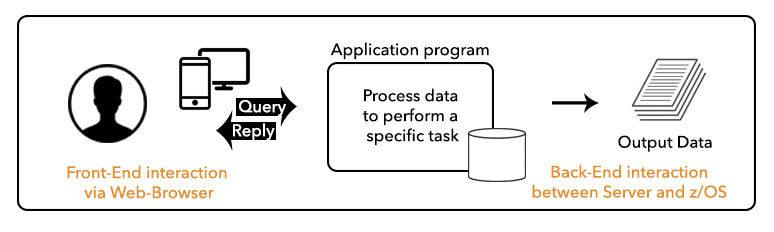
<style>
.page{position:relative;width:774px;height:232px;background:#ffffff}
.page>*{position:absolute;margin:0}
.t1{font:16.7px "AvenirNext-Medium";color:#000000}
.t2{font:16.7px "AvenirNext-Medium";color:#ffffff}
.t3{font:16.7px "AvenirNext-Medium";color:#e28e2b}
</style>
<div class="page">
<p class="t1" style="left:330px;top:42px;width:159px;height:18px">Application program</p>
<p class="t1" style="left:362px;top:88px;width:97px;height:58px;text-align:center">Process data <br>to perform a <br>specific task</p>
<p class="t2" style="left:239px;top:100px;width:47px;height:17px">Query</p>
<p class="t2" style="left:233px;top:123px;width:42px;height:18px">Reply</p>
<p class="t1" style="left:618px;top:135px;width:94px;height:17px">Output Data</p>
<p class="t3" style="left:67px;top:165px;width:160px;height:34px;text-align:center">Front-End interaction <br>via Web-Browser</p>
<p class="t3" style="left:532px;top:164px;width:195px;height:35px;text-align:center">Back-End interaction<br>between Server and z/OS</p>
</div>
